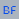
<style>
.page{position:relative;width:19px;height:19px;background:#abb4be}
.page>*{position:absolute;margin:0}
.t1{font:12px "SynchroLET";letter-spacing:0.025em;color:#0650e7}
</style>
<div class="page">
<p class="t1" style="left:3px;top:6px;width:13px;height:8px">bF</p>
</div>
